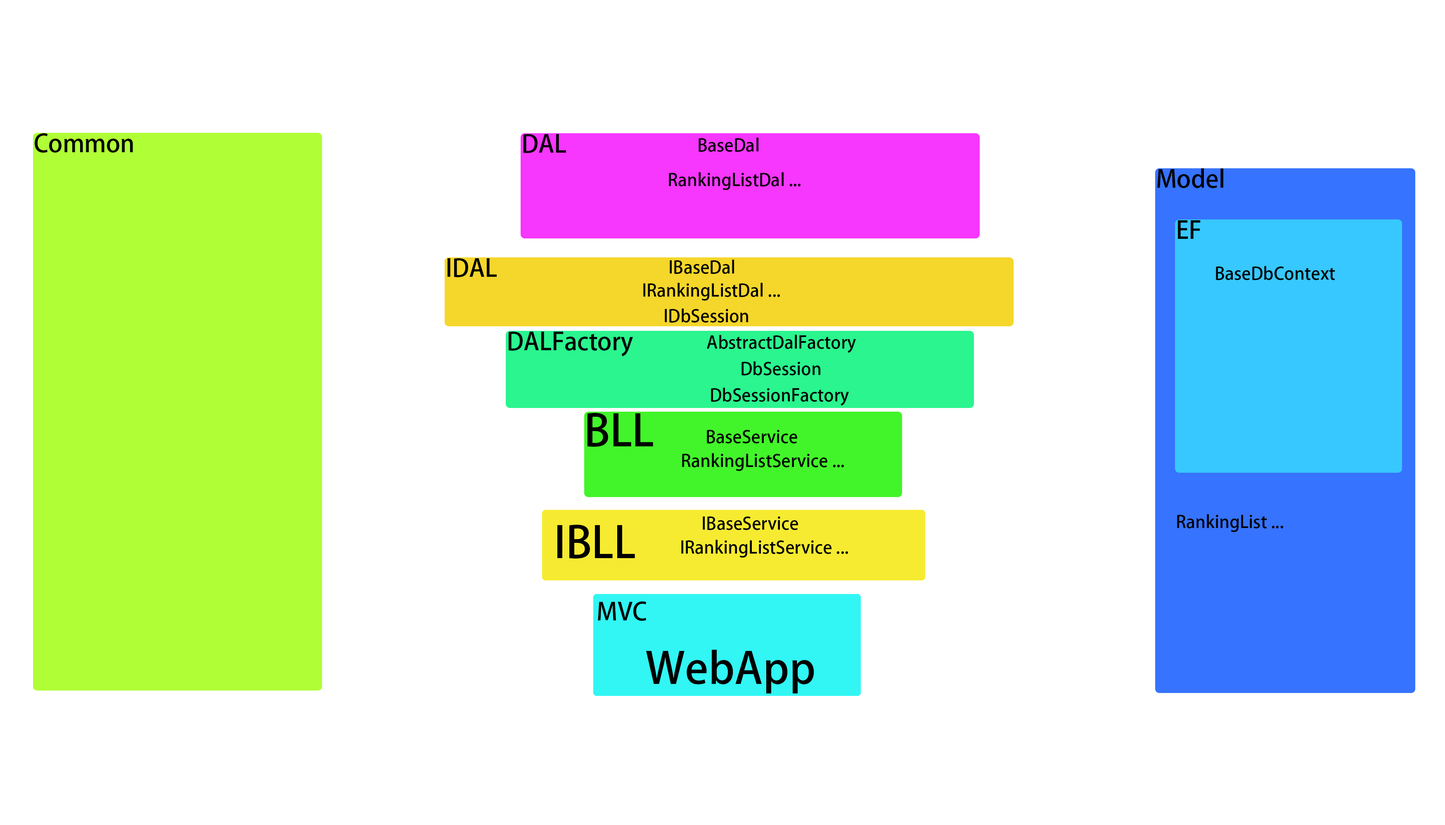
<style>
.page{position:relative;width:1445px;height:825px;background:#ffffff}
.page>*{position:absolute;margin:0}
.t1{font:24.1px "AdobeHeitiStd-Regular";color:#000000}
.t2{font:17.2px "AdobeHeitiStd-Regular";color:#000000}
.t3{font:43px "AdobeHeitiStd-Regular";color:#000000}
</style>
<div class="page">
<p class="t1" style="left:35px;top:133px;width:98px;height:20px">Common</p>
<p class="t1" style="left:523px;top:134px;width:43px;height:19px">DAL</p>
<p class="t2" style="left:698px;top:137px;width:60px;height:15px">BaseDal</p>
<p class="t2" style="left:669px;top:172px;width:131px;height:18px">RankingListDal ...</p>
<p class="t1" style="left:1157px;top:168px;width:66px;height:20px">Model</p>
<p class="t1" style="left:1178px;top:220px;width:22px;height:19px">EF</p>
<p class="t1" style="left:447px;top:258px;width:50px;height:19px">IDAL</p>
<p class="t2" style="left:669px;top:260px;width:65px;height:14px">IBaseDal</p>
<p class="t2" style="left:1215px;top:266px;width:120px;height:14px">BaseDbContext</p>
<p class="t2" style="left:643px;top:283px;width:137px;height:18px">IRankingListDal ...</p>
<p class="t2" style="left:664px;top:309px;width:84px;height:14px">IDbSession</p>
<p class="t1" style="left:508px;top:332px;width:125px;height:25px">DALFactory</p>
<p class="t2" style="left:707px;top:335px;width:149px;height:18px">AbstractDalFactory</p>
<p class="t2" style="left:741px;top:362px;width:79px;height:14px">DbSession</p>
<p class="t2" style="left:711px;top:388px;width:138px;height:18px">DbSessionFactory</p>
<p class="t3" style="left:587px;top:413px;width:66px;height:34px">BLL</p>
<p class="t2" style="left:707px;top:430px;width:90px;height:14px">BaseService</p>
<p class="t2" style="left:682px;top:453px;width:162px;height:18px">RankingListService ...</p>
<p class="t2" style="left:702px;top:517px;width:96px;height:13px">IBaseService</p>
<p class="t2" style="left:1177px;top:514px;width:106px;height:18px">RankingList ...</p>
<p class="t3" style="left:557px;top:525px;width:78px;height:34px">IBLL</p>
<p class="t2" style="left:681px;top:540px;width:167px;height:18px">IRankingListService ...</p>
<p class="t1" style="left:598px;top:602px;width:48px;height:19px">MVC</p>
<p class="t3" style="left:646px;top:650px;width:168px;height:44px">WebApp</p>
</div>
